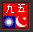
<style>
.page{position:relative;width:33px;height:32px;background:#f20000}
.page>*{position:absolute;margin:0}
.t1{font:10.4px "SimSun";color:#ffffff}
</style>
<div class="page">
<p class="t1" style="left:6px;top:4px;width:19px;height:9px">九五</p>
</div>
